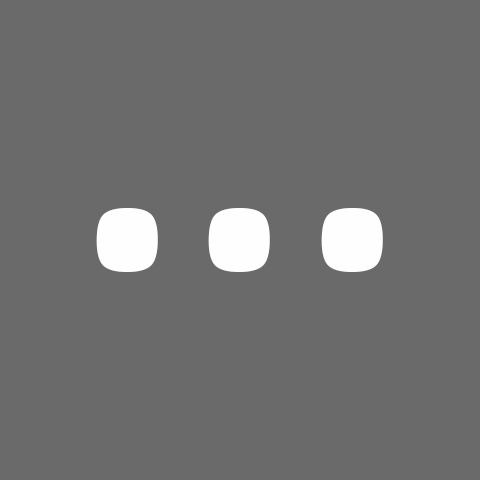
<style>
.page{position:relative;width:480px;height:480px;background:#6a6a6a}
.page>*{position:absolute;margin:0}
.t1{font:420.8px "Calibri-Bold";color:#fefefe}
</style>
<div class="page">
<p class="t1" style="left:96px;top:208px;width:287px;height:64px">...</p>
</div>
